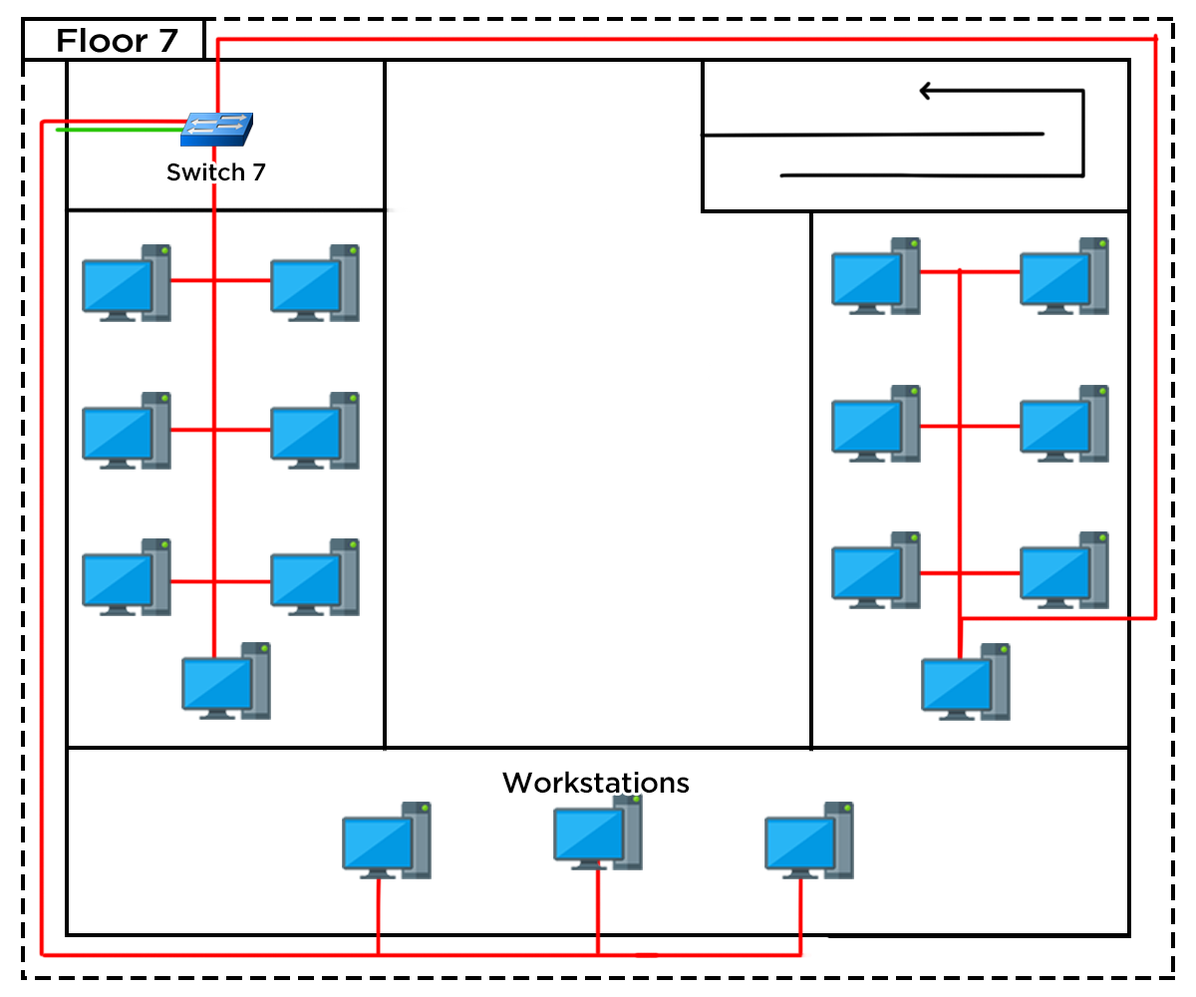
<style>
.page{position:relative;width:1196px;height:997px;background:#ffffff}
.page>*{position:absolute;margin:0}
.t1{font:32.8px "iCielGotham-Medium";letter-spacing:-0.02em;color:#000000;scale:1.1 1}
.t2{font:24.2px "iCielGotham-Medium";letter-spacing:-0.02em;color:#000000}
.t3{font:28.9px "iCielGotham-Medium";letter-spacing:-0.02em;color:#000000}
</style>
<div class="page">
<p class="t1" style="left:58px;top:28px;width:120px;height:25px">Floor 7</p>
<p class="t2" style="left:166px;top:162px;width:100px;height:19px">Switch 7</p>
<p class="t3" style="left:502px;top:771px;width:188px;height:22px">Workstations</p>
</div>
